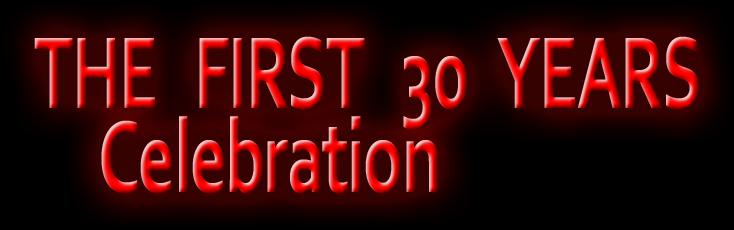
<style>
.page{position:relative;width:734px;height:230px}
.page>*{position:absolute;margin:0}
.t1{font:106.9px "Corbel-Bold";letter-spacing:-0.025em;scale:0.65 1}
.t2{font:106.9px "Corbel-Bold";letter-spacing:-0.025em;scale:0.67 1}
</style>
<div class="page">
<p class="t1" style="left:34px;top:36px;width:665px;height:94px">THE   FIRST   30   YEARS</p>
<p class="t2" style="left:101px;top:116px;width:337px;height:78px">Celebration</p>
</div>
